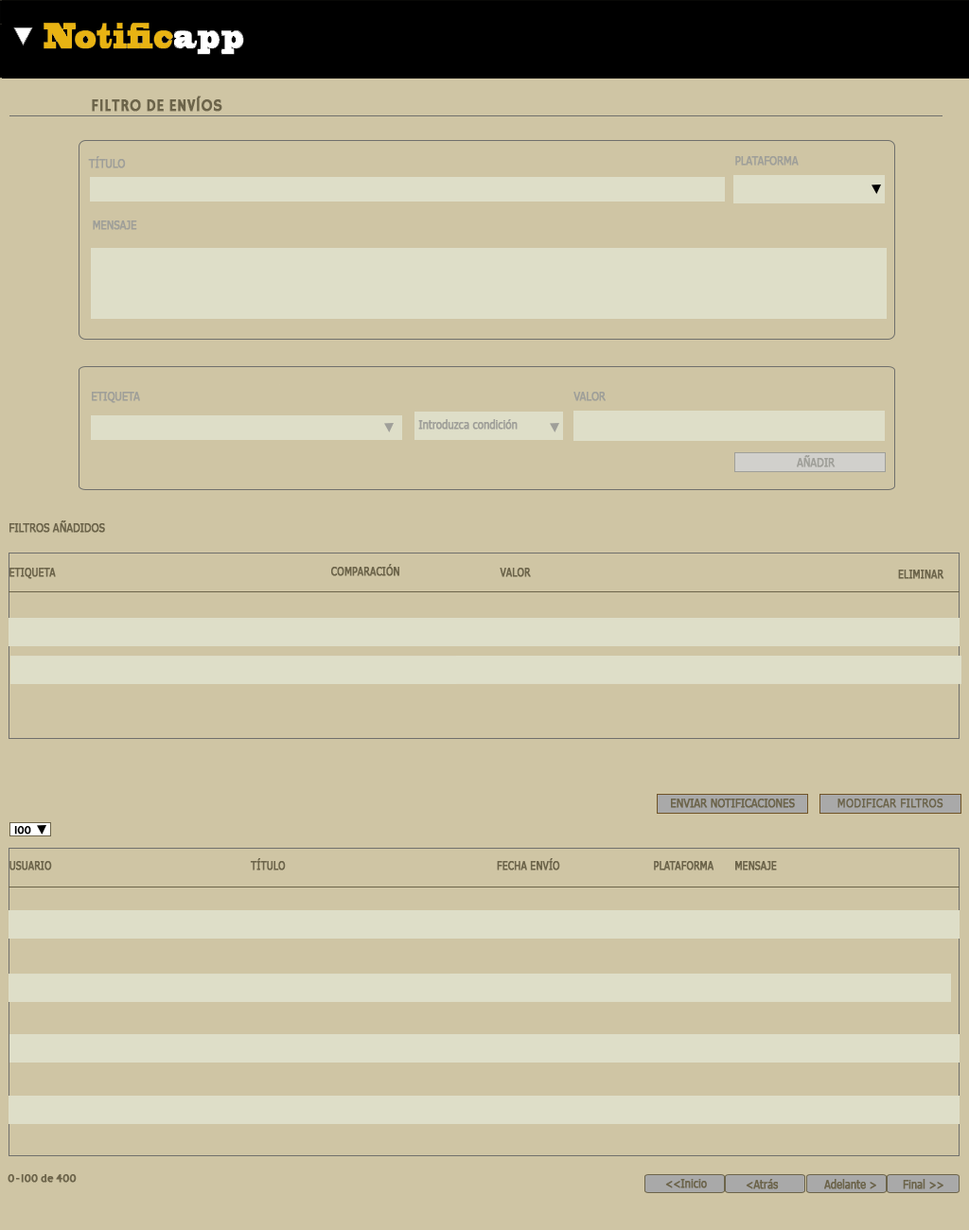
<style>
.page{position:relative;width:969px;height:1230px;background:#cfc5a4}
.page>*{position:absolute;margin:0}
.t1{font:17px "HammersmithOne";color:#6c644a;font-weight:bold;scale:0.9 1}
.t2{font:11.4px "Tahoma";color:#9f9f99;font-weight:bold;scale:0.9 1}
.t3{font:11.4px "Tahoma";color:#6c644a;font-weight:bold;scale:0.9 1}
.t4{font:11.4px "Tahoma";color:#6c644a;font-weight:bold;scale:0.86 1}
.t5{font:11.4px "Tahoma";color:#6c644a;font-weight:bold;scale:0.95 1}
.t6{font:11.4px "HammersmithOne";color:#000000;font-weight:bold;scale:0.9 1}
.t7{font:11.4px "HammersmithOne";color:#6c644a;font-weight:bold;scale:0.9 1}
</style>
<div class="page">
<p class="t1" style="left:92px;top:96px;width:130px;height:16px">FILTRO DE ENVÍOS</p>
<p class="t2" style="left:88px;top:156px;width:38px;height:12px">TÍTULO</p>
<p class="t2" style="left:735px;top:156px;width:64px;height:10px">PLATAFORMA</p>
<p class="t2" style="left:93px;top:221px;width:44px;height:9px">MENSAJE</p>
<p class="t2" style="left:92px;top:392px;width:48px;height:11px">ETIQUETA</p>
<p class="t2" style="left:574px;top:392px;width:32px;height:9px">VALOR</p>
<p class="t2" style="left:418px;top:419px;width:100px;height:11px">Introduzca condición</p>
<p class="t2" style="left:797px;top:455px;width:39px;height:13px">AÑADIR</p>
<p class="t3" style="left:9px;top:521px;width:96px;height:12px">FILTROS AÑADIDOS</p>
<p class="t4" style="left:9px;top:568px;width:47px;height:11px">ETIQUETA</p>
<p class="t4" style="left:331px;top:564px;width:68px;height:12px">COMPARACIÓN</p>
<p class="t4" style="left:500px;top:568px;width:31px;height:9px">VALOR</p>
<p class="t4" style="left:898px;top:570px;width:47px;height:9px">ELIMINAR</p>
<p class="t3" style="left:671px;top:799px;width:124px;height:9px">ENVIAR NOTIFICACIONES</p>
<p class="t5" style="left:838px;top:799px;width:106px;height:9px">MODIFICAR FILTROS</p>
<p class="t6" style="left:14px;top:826px;width:17px;height:9px">100</p>
<p class="t4" style="left:9px;top:861px;width:43px;height:10px">USUARIO</p>
<p class="t4" style="left:250px;top:858px;width:36px;height:13px">TÍTULO</p>
<p class="t4" style="left:497px;top:858px;width:63px;height:13px">FECHA ENVÍO</p>
<p class="t4" style="left:654px;top:861px;width:61px;height:10px">PLATAFORMA</p>
<p class="t4" style="left:735px;top:861px;width:42px;height:10px">MENSAJE</p>
<p class="t7" style="left:8px;top:1175px;width:69px;height:8px">0-100 de 400</p>
<p class="t3" style="left:665px;top:1179px;width:42px;height:10px">&lt;&lt;Inicio</p>
<p class="t3" style="left:746px;top:1179px;width:33px;height:11px">&lt;Atrás</p>
<p class="t3" style="left:824px;top:1179px;width:52px;height:11px">Adelante &gt;</p>
<p class="t3" style="left:903px;top:1179px;width:41px;height:11px">Final &gt;&gt;</p>
</div>
